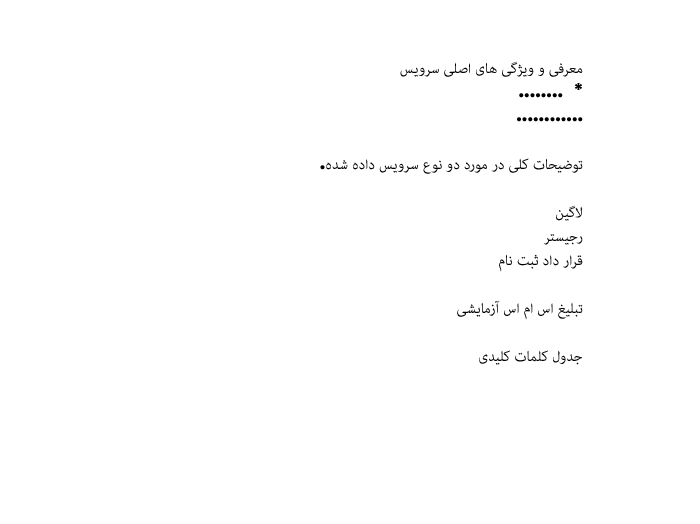
<style>
.page{position:relative;width:700px;height:524px;background:#ffffff}
.page>*{position:absolute;margin:0}
.t1{font:20px/24px "BauhausLT-Bold";color:#000000}
</style>
<div class="page">
<p class="t1" style="left:320px;top:61px;width:263px;height:304px">معرفی و ویژگی های اصلی سرویس<br>*  ........<br>............<br><br>توضیحات کلی در مورد دو نوع سرویس داده شده.<br><br>لاگین<br>رجیستر<br>قرار داد ثبت نام<br><br>تبلیغ اس ام اس آزمایشی<br><br>جدول کلمات کلیدی</p>
</div>
